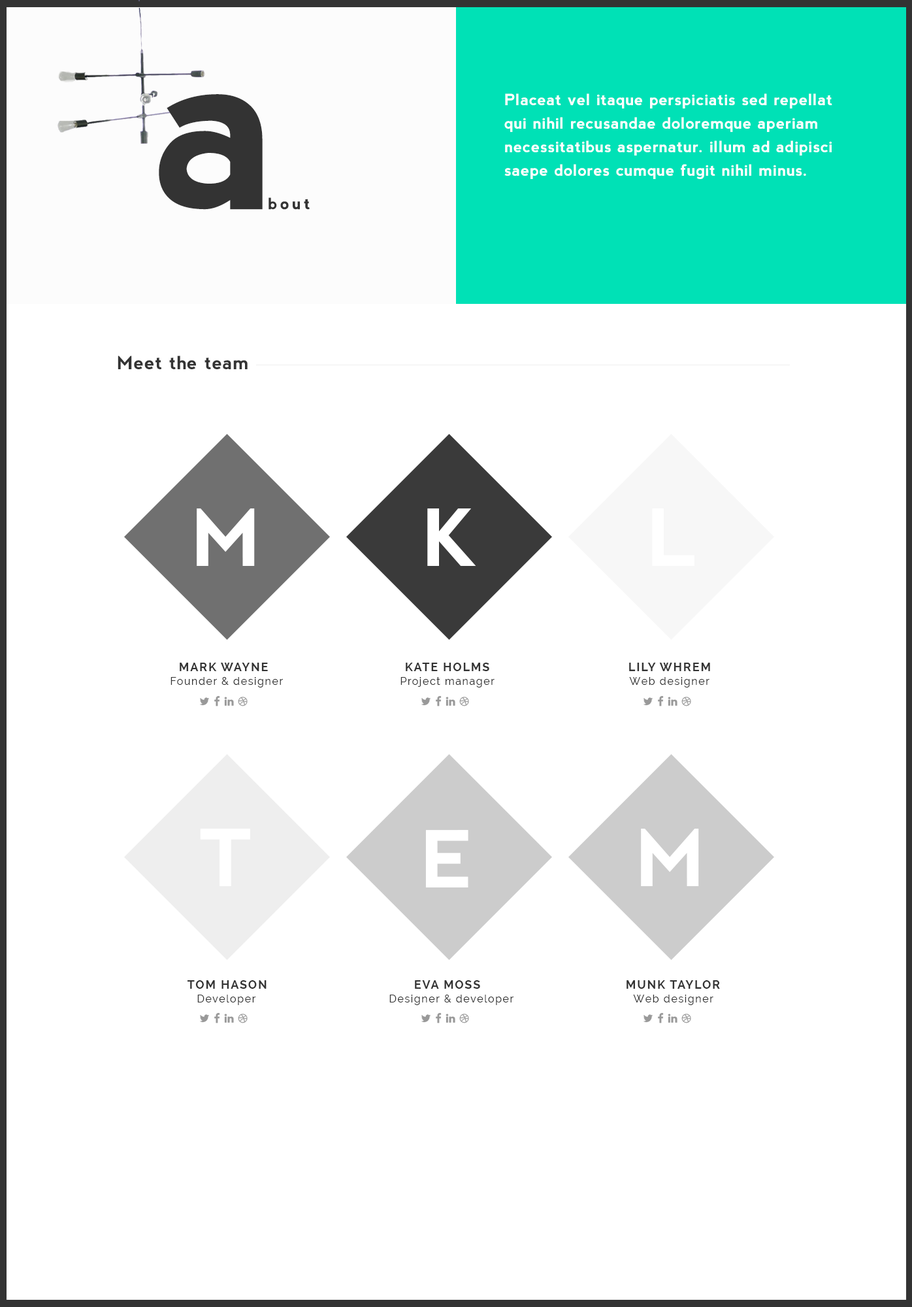
<style>
.page{position:relative;width:912px;height:1307px;background:#ffffff}
.page>*{position:absolute;margin:0}
.t1{font:235.3px "nevis-Bold";letter-spacing:0.2em;color:#333333}
.t2{font:15.7px/23.5px "nevis-Bold";letter-spacing:0.025em;color:#ffffff}
.t3{font:15.7px "nevis-Bold";letter-spacing:0.2em;color:#333333}
.t4{font:18.3px "nevis-Bold";letter-spacing:0.025em;color:#333333}
.t5{font:78.4px "nevis-Bold";letter-spacing:0.1em;color:#ffffff}
.t6{font:11.8px "Raleway-Bold";letter-spacing:0.1em;color:#333333}
.t7{font:10.5px "Raleway";letter-spacing:0.1em;color:#333333}
</style>
<div class="page">
<p class="t1" style="left:159px;top:94px;width:104px;height:116px">a</p>
<p class="t2" style="left:505px;top:93px;width:328px;height:86px">Placeat vel itaque perspiciatis sed repellat qui nihil recusandae doloremque aperiam necessitatibus aspernatur. illum ad adipisci saepe dolores cumque fugit nihil minus.</p>
<p class="t3" style="left:269px;top:197px;width:41px;height:13px">bout</p>
<p class="t4" style="left:118px;top:356px;width:130px;height:13px">Meet the team</p>
<p class="t5" style="left:197px;top:508px;width:58px;height:58px">M</p>
<p class="t5" style="left:427px;top:508px;width:49px;height:58px">K</p>
<p class="t5" style="left:652px;top:508px;width:43px;height:58px">L</p>
<p class="t6" style="left:180px;top:663px;width:88px;height:8px">MARK WAYNE</p>
<p class="t6" style="left:406px;top:663px;width:83px;height:8px">KATE HOLMS</p>
<p class="t6" style="left:629px;top:663px;width:81px;height:8px">LILY WHREM</p>
<p class="t7" style="left:171px;top:677px;width:112px;height:11px">Founder &amp; designer</p>
<p class="t7" style="left:401px;top:677px;width:94px;height:11px">Project manager</p>
<p class="t7" style="left:629px;top:677px;width:81px;height:11px">Web designer</p>
<p class="t5" style="left:200px;top:829px;width:50px;height:57px">T</p>
<p class="t5" style="left:425px;top:830px;width:44px;height:57px">E</p>
<p class="t5" style="left:641px;top:829px;width:58px;height:57px">M</p>
<p class="t6" style="left:188px;top:980px;width:79px;height:9px">TOM HASON</p>
<p class="t6" style="left:415px;top:980px;width:65px;height:9px">EVA MOSS</p>
<p class="t6" style="left:627px;top:980px;width:93px;height:9px">MUNK TAYLOR</p>
<p class="t7" style="left:197px;top:995px;width:59px;height:10px">Developer</p>
<p class="t7" style="left:389px;top:995px;width:125px;height:10px">Designer &amp; developer</p>
<p class="t7" style="left:633px;top:995px;width:81px;height:10px">Web designer</p>
</div>
